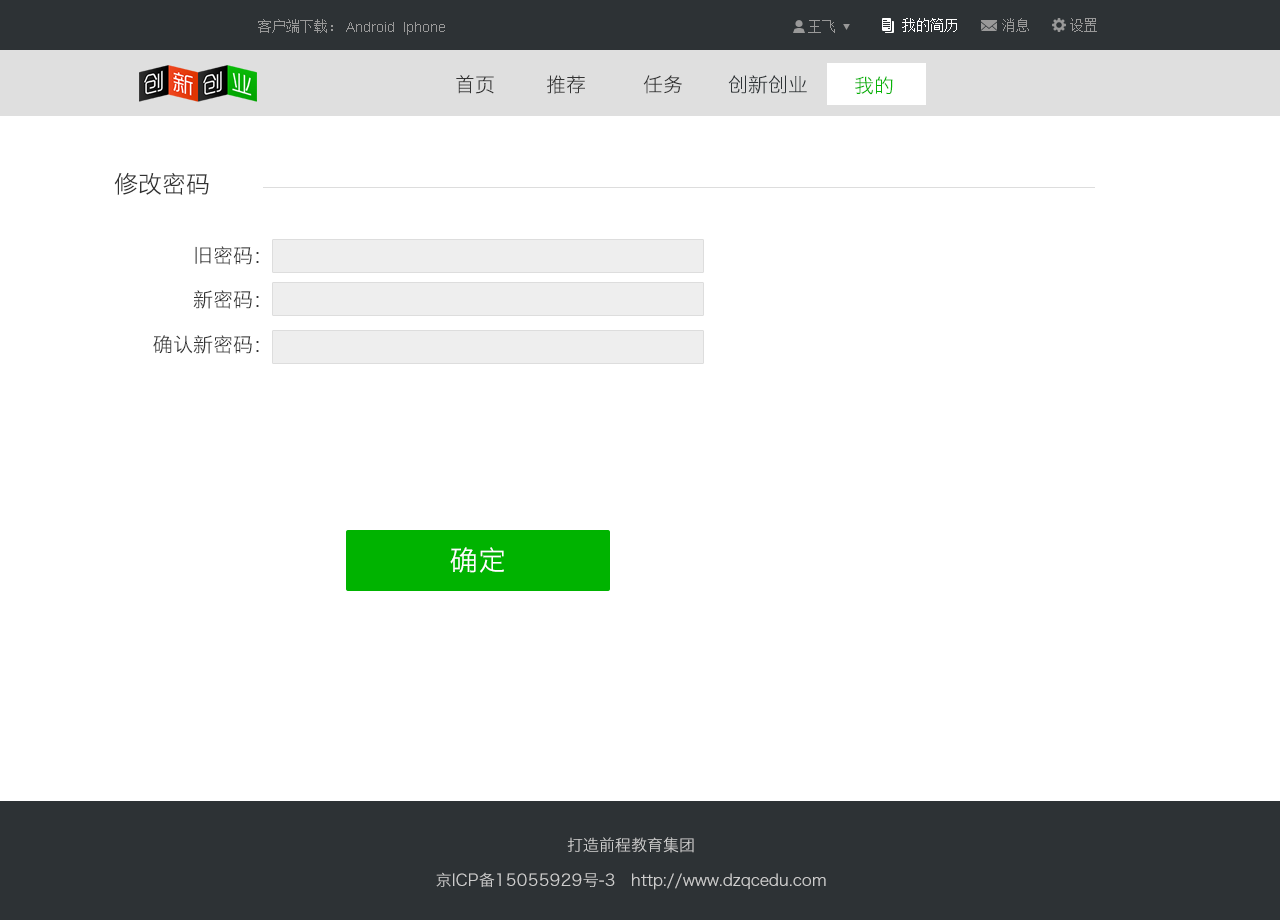
<style>
.page{position:relative;width:1280px;height:920px;background:#ffffff}
.page>*{position:absolute;margin:0}
.t1{font:14px "SimSun";color:#999999}
.t2{font:14px "ArialMT";color:#999999}
.t3{font:14px "SimSun";color:#ffffff}
.t4{font:20px "HiraginoSansGB-W3";color:#333333}
.t5{font:20px "HiraginoSansGB-W3";color:#2d3235}
.t6{font:20px "HiraginoSansGB-W3";color:#08b407}
.t7{font:24px "HiraginoSansGB-W3";color:#333333}
.t8{font:28px "HiraginoSansGB-W3";color:#ffffff}
.t9{font:16px "HiraginoSansGB-W3";color:#cccccc}
</style>
<div class="page">
<p class="t1" style="left:258px;top:19px;width:75px;height:14px">客户端下载：</p>
<p class="t2" style="left:346px;top:22px;width:99px;height:13px">Android  Iphone</p>
<p class="t1" style="left:808px;top:20px;width:27px;height:13px">王飞</p>
<p class="t3" style="left:902px;top:18px;width:55px;height:14px">我的简历</p>
<p class="t1" style="left:1002px;top:18px;width:27px;height:14px">消息</p>
<p class="t1" style="left:1070px;top:18px;width:27px;height:14px">设置</p>
<p class="t4" style="left:456px;top:75px;width:38px;height:19px">首页</p>
<p class="t4" style="left:547px;top:75px;width:38px;height:19px">推荐</p>
<p class="t4" style="left:643px;top:75px;width:39px;height:19px">任务</p>
<p class="t5" style="left:728px;top:75px;width:79px;height:19px">创新创业</p>
<p class="t6" style="left:855px;top:76px;width:38px;height:19px">我的</p>
<p class="t7" style="left:114px;top:172px;width:95px;height:23px">修改密码</p>
<p class="t4" style="left:195px;top:246px;width:64px;height:19px">旧密码：</p>
<p class="t4" style="left:193px;top:290px;width:66px;height:19px">新密码：</p>
<p class="t4" style="left:153px;top:335px;width:106px;height:19px">确认新密码：</p>
<p class="t8" style="left:450px;top:547px;width:54px;height:26px">确定</p>
<p class="t9" style="left:567px;top:837px;width:127px;height:16px">打造前程教育集团</p>
<p class="t9" style="left:436px;top:872px;width:390px;height:18px">京ICP备15055929号-3   http://www.dzqcedu.com</p>
</div>
